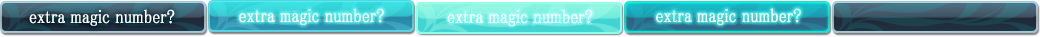
<style>
.page{position:relative;width:1040px;height:37px}
.page>*{position:absolute;margin:0}
.t1{font:19px "MS-PMincho";color:#ffffff;font-weight:bold;scale:0.84 1}
</style>
<div class="page">
<p class="t1" style="left:29px;top:9px;width:146px;height:17px">extra magic number?</p>
<p class="t1" style="left:239px;top:8px;width:145px;height:17px">extra magic number?</p>
<p class="t1" style="left:447px;top:9px;width:146px;height:17px">extra magic number?</p>
<p class="t1" style="left:656px;top:8px;width:145px;height:17px">extra magic number?</p>
</div>
